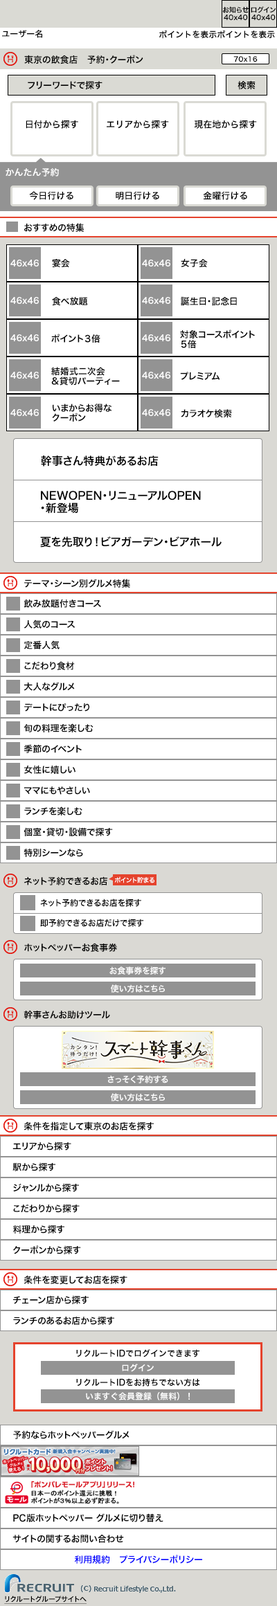
<style>
.page{position:relative;width:277px;height:1606px;background:#ffffff}
.page>*{position:absolute;margin:0}
.t1{font:6.9px/7.6px "HiraKakuPro-W6";color:#000000}
.t2{font:8.3px "HiraKakuPro-W6";color:#000000}
.t3{font:9px "HiraKakuPro-W6";color:#000000}
.t4{font:6.9px "HiraKakuPro-W6";color:#000000}
.t5{font:9px "HiraKakuPro-W6";color:#ffffff}
.t6{font:8.3px "HiraKakuPro-W6";color:#ffffff}
.t7{font:9px/9.7px "HiraKakuPro-W6";color:#000000}
.t8{font:11.1px "HiraKakuPro-W6";color:#000000}
.t9{font:11.1px/12.5px "HiraKakuPro-W6";color:#000000}
.t10{font:6.2px "HiraKakuPro-W6";color:#ffffff}
.t11{font:9px "HiraKakuPro-W6";color:#0000ff}
.t12{font:6.9px "HiraKakuPro-W6";color:#000000;text-decoration:underline}
</style>
<div class="page">
<p class="t1" style="left:222px;top:6px;width:27px;height:14px;text-align:center">お知らせ<br>40x40</p>
<p class="t1" style="left:251px;top:6px;width:25px;height:14px;text-align:center">ログイン<br>40x40</p>
<p class="t2" style="left:2px;top:30px;width:40px;height:8px">ユーザー名</p>
<p class="t2" style="left:159px;top:30px;width:116px;height:9px">ポイントを表示ポイントを表示</p>
<p class="t3" style="left:24px;top:55px;width:119px;height:9px">東京の飲食店　予約・クーポン</p>
<p class="t4" style="left:233px;top:56px;width:25px;height:6px">70x16</p>
<p class="t3" style="left:28px;top:81px;width:74px;height:8px">フリーワードで探す</p>
<p class="t3" style="left:237px;top:81px;width:18px;height:9px">検索</p>
<p class="t3" style="left:26px;top:120px;width:52px;height:9px">日付から探す</p>
<p class="t3" style="left:107px;top:120px;width:62px;height:9px">エリアから探す</p>
<p class="t3" style="left:194px;top:120px;width:63px;height:9px">現在地から探す</p>
<p class="t5" style="left:6px;top:168px;width:53px;height:9px">かんたん予約</p>
<p class="t3" style="left:29px;top:191px;width:44px;height:9px">今日行ける</p>
<p class="t3" style="left:116px;top:191px;width:43px;height:9px">明日行ける</p>
<p class="t3" style="left:203px;top:191px;width:44px;height:9px">金曜行ける</p>
<p class="t3" style="left:24px;top:223px;width:60px;height:9px">おすすめの特集</p>
<p class="t6" style="left:10px;top:260px;width:29px;height:7px">46x46</p>
<p class="t3" style="left:52px;top:259px;width:18px;height:9px">宴会</p>
<p class="t6" style="left:142px;top:260px;width:28px;height:7px">46x46</p>
<p class="t3" style="left:181px;top:259px;width:27px;height:9px">女子会</p>
<p class="t6" style="left:10px;top:297px;width:29px;height:7px">46x46</p>
<p class="t3" style="left:52px;top:297px;width:36px;height:9px">食べ放題</p>
<p class="t6" style="left:142px;top:297px;width:28px;height:7px">46x46</p>
<p class="t3" style="left:181px;top:297px;width:56px;height:9px">誕生日・記念日</p>
<p class="t7" style="left:180px;top:330px;width:75px;height:18px">対象コースポイント<br>５倍</p>
<p class="t6" style="left:10px;top:334px;width:29px;height:7px">46x46</p>
<p class="t3" style="left:51px;top:334px;width:49px;height:9px">ポイント３倍</p>
<p class="t6" style="left:142px;top:334px;width:28px;height:7px">46x46</p>
<p class="t6" style="left:10px;top:372px;width:29px;height:7px">46x46</p>
<p class="t7" style="left:51px;top:367px;width:69px;height:19px">結婚式二次会<br>＆貸切パーティー</p>
<p class="t6" style="left:142px;top:372px;width:28px;height:7px">46x46</p>
<p class="t3" style="left:180px;top:372px;width:40px;height:8px">プレミアム</p>
<p class="t6" style="left:10px;top:409px;width:29px;height:7px">46x46</p>
<p class="t7" style="left:52px;top:404px;width:59px;height:18px">いまからお得な<br>クーポン</p>
<p class="t6" style="left:142px;top:409px;width:28px;height:7px">46x46</p>
<p class="t3" style="left:181px;top:409px;width:51px;height:9px">カラオケ検索</p>
<p class="t8" style="left:41px;top:456px;width:118px;height:11px">幹事さん特典があるお店</p>
<p class="t9" style="left:41px;top:491px;width:160px;height:23px">NEWOPEN・リニューアルOPEN<br>・新登場</p>
<p class="t8" style="left:40px;top:537px;width:182px;height:11px">夏を先取り！ビアガーデン・ビアホール</p>
<p class="t3" style="left:24px;top:579px;width:106px;height:9px">テーマ・シーン別グルメ特集</p>
<p class="t3" style="left:24px;top:599px;width:77px;height:9px">飲み放題付きコース</p>
<p class="t3" style="left:24px;top:620px;width:51px;height:9px">人気のコース</p>
<p class="t3" style="left:24px;top:640px;width:36px;height:9px">定番人気</p>
<p class="t3" style="left:24px;top:661px;width:51px;height:9px">こだわり食材</p>
<p class="t3" style="left:24px;top:682px;width:51px;height:9px">大人なグルメ</p>
<p class="t3" style="left:24px;top:703px;width:65px;height:9px">デートにぴったり</p>
<p class="t3" style="left:24px;top:723px;width:69px;height:9px">旬の料理を楽しむ</p>
<p class="t3" style="left:24px;top:744px;width:58px;height:9px">季節のイベント</p>
<p class="t3" style="left:24px;top:765px;width:51px;height:9px">女性に嬉しい</p>
<p class="t3" style="left:24px;top:786px;width:66px;height:9px">ママにもやさしい</p>
<p class="t3" style="left:24px;top:807px;width:58px;height:9px">ランチを楽しむ</p>
<p class="t3" style="left:24px;top:827px;width:89px;height:9px">個室・貸切・設備で探す</p>
<p class="t3" style="left:24px;top:848px;width:59px;height:9px">特別シーンなら</p>
<p class="t3" style="left:24px;top:876px;width:83px;height:9px">ネット予約できるお店</p>
<p class="t10" style="left:114px;top:876px;width:40px;height:7px">ポイント貯まる</p>
<p class="t2" style="left:40px;top:899px;width:101px;height:8px">ネット予約できるお店を探す</p>
<p class="t2" style="left:40px;top:919px;width:103px;height:8px">即予約できるお店だけで探す</p>
<p class="t3" style="left:24px;top:943px;width:93px;height:9px">ホットペッパーお食事券</p>
<p class="t6" style="left:109px;top:966px;width:56px;height:9px">お食事券を探す</p>
<p class="t6" style="left:111px;top:984px;width:54px;height:9px">使い方はこちら</p>
<p class="t3" style="left:24px;top:1010px;width:86px;height:9px">幹事さんお助けツール</p>
<p class="t6" style="left:107px;top:1075px;width:61px;height:8px">さっそく予約する</p>
<p class="t6" style="left:111px;top:1093px;width:54px;height:8px">使い方はこちら</p>
<p class="t3" style="left:24px;top:1122px;width:130px;height:9px">条件を指定して東京のお店を探す</p>
<p class="t3" style="left:12px;top:1142px;width:59px;height:9px">エリアから探す</p>
<p class="t3" style="left:12px;top:1162px;width:43px;height:9px">駅から探す</p>
<p class="t3" style="left:13px;top:1183px;width:66px;height:9px">ジャンルから探す</p>
<p class="t3" style="left:13px;top:1204px;width:67px;height:9px">こだわりから探す</p>
<p class="t3" style="left:13px;top:1225px;width:51px;height:9px">料理から探す</p>
<p class="t3" style="left:12px;top:1245px;width:69px;height:9px">クーポンから探す</p>
<p class="t3" style="left:24px;top:1275px;width:103px;height:10px">条件を変更してお店を探す</p>
<p class="t3" style="left:13px;top:1295px;width:76px;height:9px">チェーン店から探す</p>
<p class="t3" style="left:13px;top:1316px;width:101px;height:9px">ランチのあるお店から探す</p>
<p class="t2" style="left:76px;top:1349px;width:123px;height:9px">リクルートIDでログインできます</p>
<p class="t6" style="left:122px;top:1364px;width:32px;height:8px">ログイン</p>
<p class="t2" style="left:76px;top:1378px;width:124px;height:9px">リクルートIDをお持ちでない方は</p>
<p class="t6" style="left:86px;top:1392px;width:104px;height:9px">いますぐ会員登録（無料）！</p>
<p class="t3" style="left:13px;top:1430px;width:116px;height:9px">予約ならホットペッパーグルメ</p>
<p class="t3" style="left:13px;top:1513px;width:150px;height:9px">PC版ホットペッパー グルメに切り替え</p>
<p class="t3" style="left:12px;top:1535px;width:112px;height:8px">サイトの関するお問い合わせ</p>
<p class="t11" style="left:74px;top:1555px;width:128px;height:9px">利用規約　プライバシーポリシー</p>
<p class="t12" style="left:4px;top:1596px;width:83px;height:8px">リクルートグループサイトへ</p>
</div>
